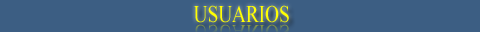
<style>
.page{position:relative;width:480px;height:32px;background:#3c5e83}
.page>*{position:absolute;margin:0}
.t1{font:24px "TimesNewRomanPSMT";color:#ffff01;scale:0.8 1}
</style>
<div class="page">
<p class="t1" style="left:193px;top:5px;width:96px;height:18px">USUARIOS</p>
</div>
